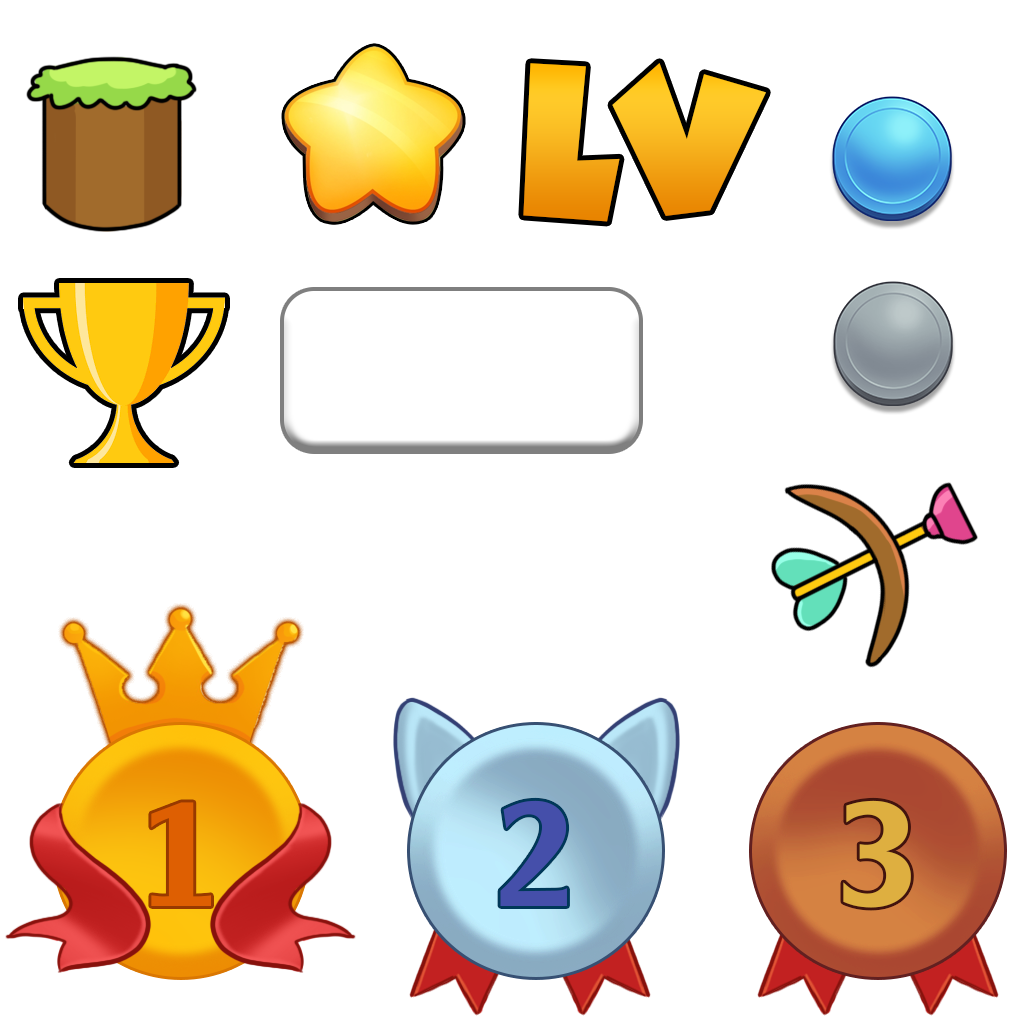
<style>
.page{position:relative;width:1024px;height:1024px;background:#ffffff}
.page>*{position:absolute;margin:0}
.t1{font:208.8px "ComicKings";letter-spacing:0.07em;scale:0.96 1}
.t2{font:143.6px "UTM-Alexander";letter-spacing:0.07em;color:#de5f02}
.t3{font:143.6px "UTM-Alexander";letter-spacing:0.07em;color:#454faa}
.t4{font:143.6px "UTM-Alexander";letter-spacing:0.07em;color:#deaf40}
</style>
<div class="page">
<p class="t1" style="left:523px;top:63px;width:243px;height:159px">LV</p>
<p class="t2" style="left:151px;top:802px;width:60px;height:104px">1</p>
<p class="t3" style="left:500px;top:800px;width:67px;height:106px">2</p>
<p class="t4" style="left:843px;top:800px;width:68px;height:108px">3</p>
</div>
